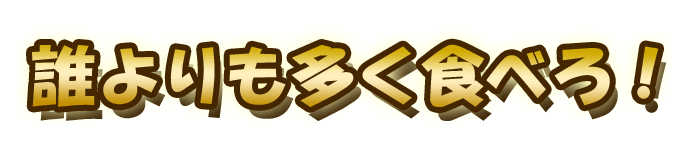
<style>
.page{position:relative;width:700px;height:150px;background:#ffffff}
.page>*{position:absolute;margin:0}
.t1{font:64.8px "HGSoeiKakupoptai"}
</style>
<div class="page">
<p class="t1" style="left:32px;top:44px;width:627px;height:63px">誰よりも多く食べろ！</p>
</div>
